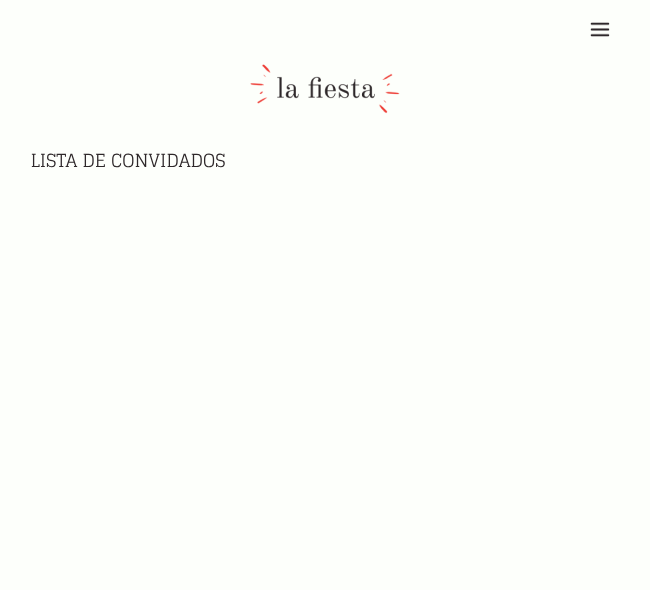
<style>
.page{position:relative;width:650px;height:590px;background:#fdfffb}
.page>*{position:absolute;margin:0}
.t1{font:18px "Glegoo-Regular";color:#2e282a}
</style>
<div class="page">
<p class="t1" style="left:31px;top:153px;width:194px;height:15px">LISTA DE CONVIDADOS</p>
</div>
